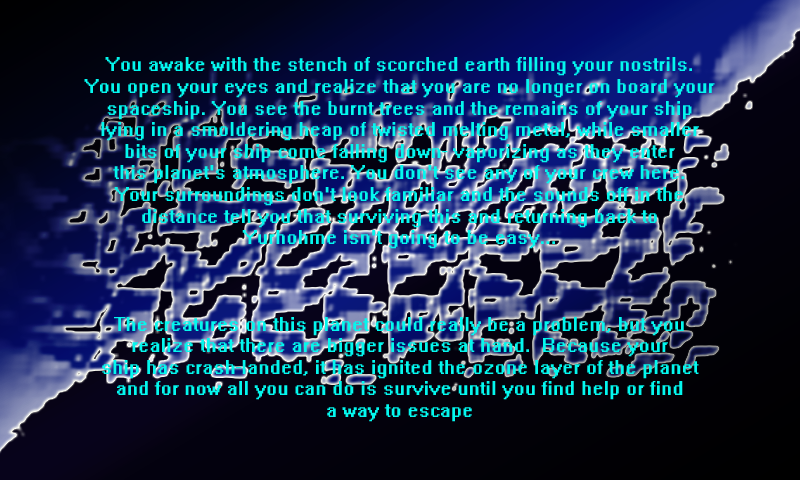
<style>
.page{position:relative;width:800px;height:480px}
.page>*{position:absolute;margin:0}
.t1{font:18px "System";color:#04f7ee}
</style>
<div class="page">
<p class="t1" style="left:84px;top:57px;width:631px;height:365px;text-align:center">You awake with the stench of scorched earth filling your nostrils. <br>You open your eyes and realize that you are no longer on board your <br>spaceship. You see the burnt trees and the remains of your ship <br>lying in a smoldering heap of twisted melting metal, while smaller <br>bits of your ship come falling down- vaporizing as they enter <br>this planet's atmosphere. You don't see any of your crew here.<br>Your surroundings don't look familiar and the sounds off in the<br>distance tell you that surviving this and returning back to<br>Yurhohme isn't going to be easy...<br><br><br><br>The creatures on this planet could really be a problem, but you <br>realize that there are bigger issues at hand.  Because your <br>ship has crash-landed, it has ignited the ozone layer of the planet <br>and for now all you can do is survive until you find help or find <br>a way to escape</p>
</div>
